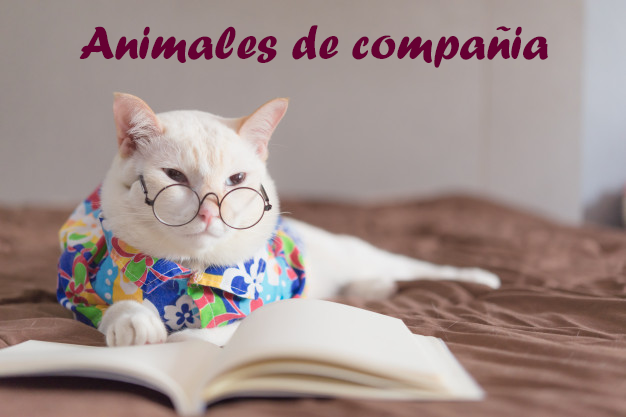
<style>
.page{position:relative;width:626px;height:417px}
.page>*{position:absolute;margin:0}
.t1{font:48px "ForteMT";color:#660033}
</style>
<div class="page">
<p class="t1" style="left:79px;top:25px;width:469px;height:43px">Animales de compañia</p>
</div>
